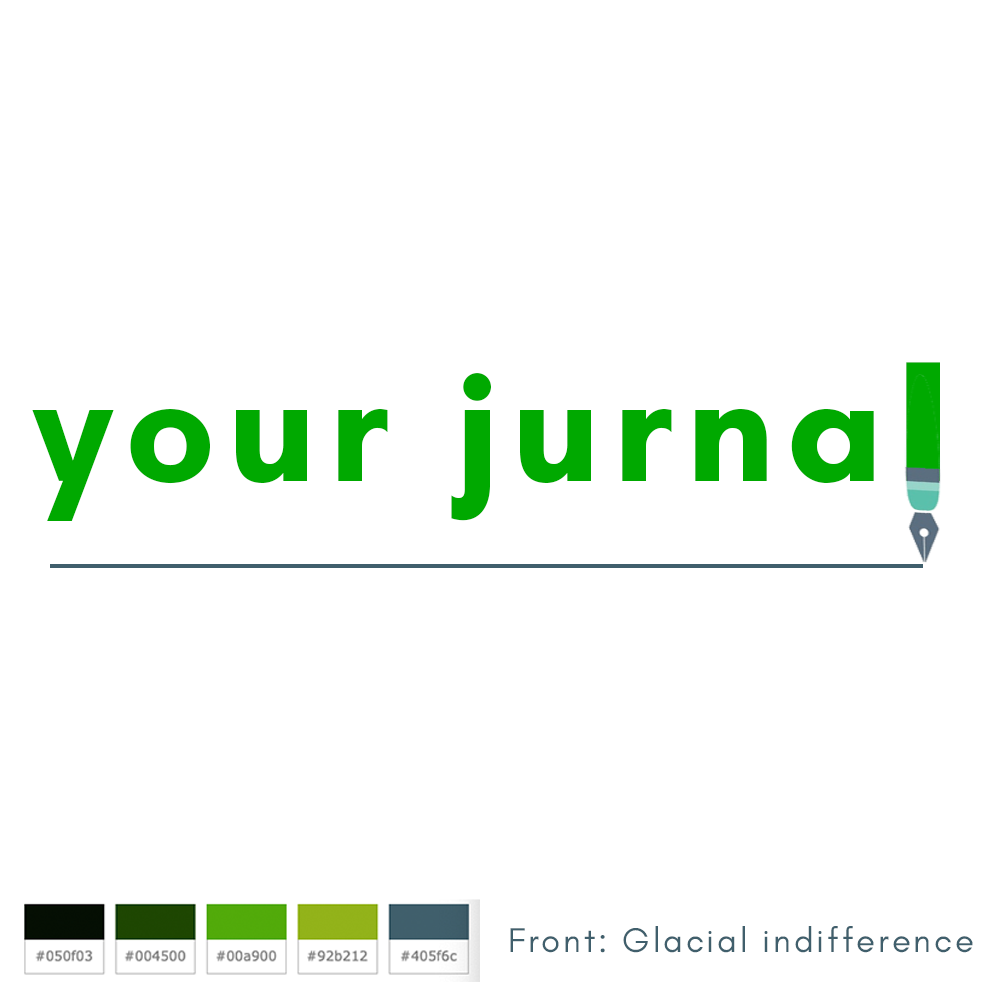
<style>
.page{position:relative;width:1000px;height:1000px;background:#ffffff}
.page>*{position:absolute;margin:0}
.t1{font:158.2px "GlacialIndifference-Bold";letter-spacing:0.08em;color:#00a900;scale:1.42 1}
.t2{font:158.2px "GlacialIndifference-Bold";letter-spacing:0.08em;color:#00a900}
.t3{font:34.8px "GlacialIndifference-Regular";letter-spacing:0.08em;color:#405f6c}
</style>
<div class="page">
<p class="t1" style="left:906px;top:362px;width:34px;height:119px">l</p>
<p class="t2" style="left:32px;top:373px;width:842px;height:148px">your jurna</p>
<p class="t3" style="left:510px;top:926px;width:463px;height:27px">Front: Glacial indifference</p>
</div>
